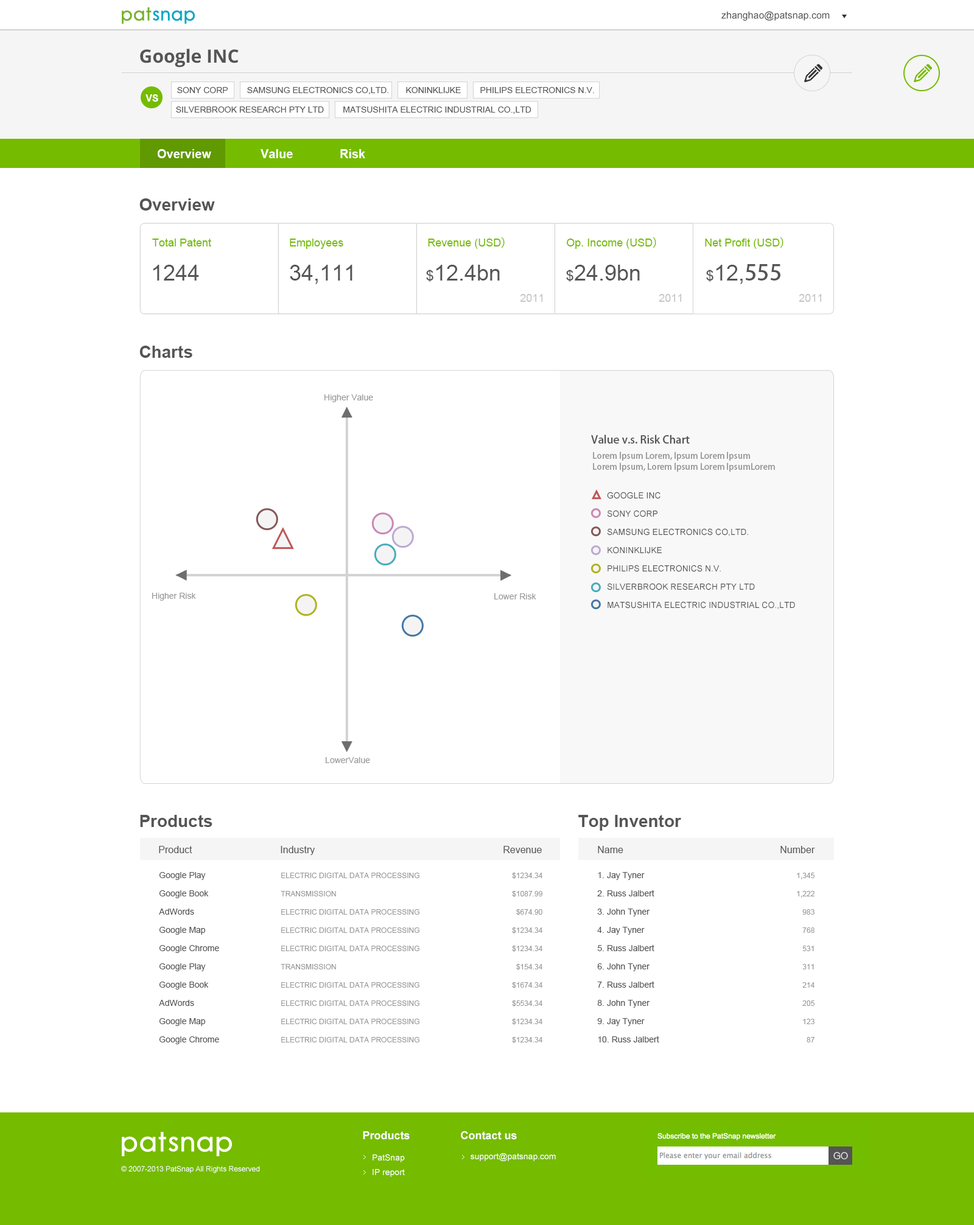
<style>
.page{position:relative;width:974px;height:1225px;background:#ffffff}
.page>*{position:absolute;margin:0}
.t1{font:9.7px "ArialMT";color:#555555}
.t2{font:18.3px "OpenSans-Bold";color:#555555}
.t3{font:8.5px "ArialMT";color:#555555}
.t4{font:9.7px "Arial-BoldMT";color:#ffffff}
.t5{font:12.2px "Arial-BoldMT";color:#ffffff}
.t6{font:17px "Arial-BoldMT";color:#555555}
.t7{font:10.9px "ArialMT";color:#75bb00}
.t8{font:10.9px "AdobeHeitiStd-Regular";color:#75bb00}
.t9{font:21.9px "ArialMT";color:#555555}
.t10{font:14.6px "ArialMT";color:#555555}
.t11{font:21.9px "AdobeHeitiStd-Regular";color:#555555}
.t12{font:10.9px "ArialMT";color:#c6c6c6}
.t13{font:8.5px "ArialMT";color:#999999}
.t14{font:10.9px "AdobeHeitiStd-Regular";color:#555555}
.t15{font:8.5px/10.9px "AdobeHeitiStd-Regular";color:#999999}
.t16{font:8.5px/18.3px "ArialMT";color:#555555}
.t17{font:7.3px/18.3px "ArialMT";color:#999999}
.t18{font:11px "Arial-BoldMT";color:#ffffff}
.t19{font:8.5px/2.4px "ArialMT";color:#ffffff}
.t20{font:8.5px "ArialMT";color:#ffffff}
.t21{font:7.3px "ArialMT";color:#ffffff}
</style>
<div class="page">
<p class="t1" style="left:721px;top:11px;width:108px;height:10px">zhanghao@patsnap.com</p>
<p class="t2" style="left:140px;top:49px;width:99px;height:19px">Google INC</p>
<p class="t3" style="left:177px;top:87px;width:417px;height:7px">SONY CORP        SAMSUNG ELECTRONICS CO,LTD.       KONINKLIJKE        PHILIPS ELECTRONICS N.V.</p>
<p class="t4" style="left:145px;top:94px;width:13px;height:8px">VS</p>
<p class="t3" style="left:176px;top:106px;width:355px;height:8px">SILVERBROOK RESEARCH PTY LTD        MATSUSHITA ELECTRIC INDUSTRIAL CO.,LTD</p>
<p class="t5" style="left:157px;top:149px;width:54px;height:9px">Overview</p>
<p class="t5" style="left:260px;top:149px;width:33px;height:9px">Value</p>
<p class="t5" style="left:340px;top:149px;width:25px;height:9px">Risk</p>
<p class="t6" style="left:139px;top:198px;width:76px;height:13px">Overview</p>
<p class="t7" style="left:152px;top:239px;width:59px;height:7px">Total Patent</p>
<p class="t7" style="left:290px;top:239px;width:53px;height:10px">Employees</p>
<p class="t7" style="left:428px;top:237px;width:76px;height:12px">Revenue (USD<span class="t8">）</span></p>
<p class="t7" style="left:566px;top:237px;width:90px;height:12px">Op. Income (USD<span class="t8">）</span></p>
<p class="t7" style="left:705px;top:237px;width:78px;height:12px">Net Profit (USD<span class="t8">）</span></p>
<p class="t9" style="left:153px;top:265px;width:46px;height:16px">1244</p>
<p class="t9" style="left:290px;top:265px;width:62px;height:19px">34,111</p>
<p class="t9" style="left:426px;top:265px;width:74px;height:17px"><span class="t10">$</span>12.4bn</p>
<p class="t9" style="left:566px;top:265px;width:73px;height:17px"><span class="t10">$</span>24.9bn</p>
<p class="t9" style="left:706px;top:264px;width:74px;height:20px"><span class="t10">$</span>12,<span class="t11">555</span></p>
<p class="t12" style="left:520px;top:294px;width:23px;height:8px">2011</p>
<p class="t12" style="left:658px;top:294px;width:23px;height:8px">2011</p>
<p class="t12" style="left:798px;top:294px;width:23px;height:8px">2011</p>
<p class="t6" style="left:139px;top:346px;width:53px;height:12px">Charts</p>
<p class="t13" style="left:324px;top:394px;width:49px;height:8px">Higher Value</p>
<p class="t14" style="left:591px;top:434px;width:98px;height:10px">Value v.s. Risk Chart</p>
<p class="t15" style="left:593px;top:451px;width:182px;height:21px">Lorem lpsum Lorem, lpsum Lorem lpsum<br>Lorem lpsum, Lorem lpsum Lorem lpsumLorem</p>
<p class="t16" style="left:607px;top:492px;width:188px;height:117px">GOOGLE INC<br>SONY CORP<br>SAMSUNG ELECTRONICS CO,LTD.<br>KONINKLIJKE <br>PHILIPS ELECTRONICS N.V.<br>SILVERBROOK RESEARCH PTY LTD<br>MATSUSHITA ELECTRIC INDUSTRIAL CO.,LTD</p>
<p class="t13" style="left:152px;top:593px;width:44px;height:8px">Higher Risk</p>
<p class="t13" style="left:494px;top:593px;width:42px;height:6px">Lower Risk</p>
<p class="t13" style="left:325px;top:757px;width:45px;height:6px">LowerValue</p>
<p class="t6" style="left:140px;top:815px;width:72px;height:12px">Products</p>
<p class="t6" style="left:578px;top:815px;width:103px;height:16px">Top Inventor</p>
<p class="t1" style="left:159px;top:846px;width:33px;height:7px">Product</p>
<p class="t1" style="left:281px;top:846px;width:34px;height:9px">Industry</p>
<p class="t1" style="left:503px;top:846px;width:39px;height:7px">Revenue</p>
<p class="t1" style="left:598px;top:846px;width:25px;height:7px">Name</p>
<p class="t1" style="left:780px;top:846px;width:35px;height:7px">Number</p>
<p class="t16" style="left:159px;top:872px;width:60px;height:172px">Google Play<br>Google Book<br>AdWords<br>Google Map<br>Google Chrome<br>Google Play<br>Google Book<br>AdWords<br>Google Map<br>Google Chrome</p>
<p class="t17" style="left:281px;top:873px;width:138px;height:169px">ELECTRIC DIGITAL DATA PROCESSING<br>TRANSMISSION<br>ELECTRIC DIGITAL DATA PROCESSING<br>ELECTRIC DIGITAL DATA PROCESSING<br>ELECTRIC DIGITAL DATA PROCESSING<br>TRANSMISSION<br>ELECTRIC DIGITAL DATA PROCESSING<br>ELECTRIC DIGITAL DATA PROCESSING<br>ELECTRIC DIGITAL DATA PROCESSING<br>ELECTRIC DIGITAL DATA PROCESSING</p>
<p class="t17" style="left:512px;top:873px;width:30px;height:170px;text-align:right">$1234.34<br>$1087.99<br>$674.90<br>$1234.34<br>$1234.34<br>$154.34<br>$1674.34<br>$5534.34<br>$1234.34<br>$1234.34</p>
<p class="t16" style="left:597px;top:872px;width:62px;height:170px">1. Jay Tyner<br>2. Russ Jalbert<br>3. John Tyner<br>4. Jay Tyner<br>5. Russ Jalbert<br>6. John Tyner<br>7. Russ Jalbert<br>8. John Tyner<br>9. Jay Tyner<br>10. Russ Jalbert</p>
<p class="t17" style="left:796px;top:873px;width:18px;height:169px;text-align:right">1,345<br>1,222<br>983<br>768<br>531<br>311<br>214<br>205<br>123<br>87</p>
<p class="t18" style="left:363px;top:1131px;width:46px;height:9px">Products</p>
<p class="t18" style="left:461px;top:1131px;width:56px;height:9px">Contact us</p>
<p class="t19" style="left:372px;top:1154px;width:33px;height:23px">PatSnap    <br>IP report</p>
<p class="t20" style="left:470px;top:1153px;width:86px;height:8px">support@patsnap.com</p>
<p class="t21" style="left:121px;top:1166px;width:139px;height:7px">© 2007-2013 PatSnap All Rights Reserved</p>
</div>
